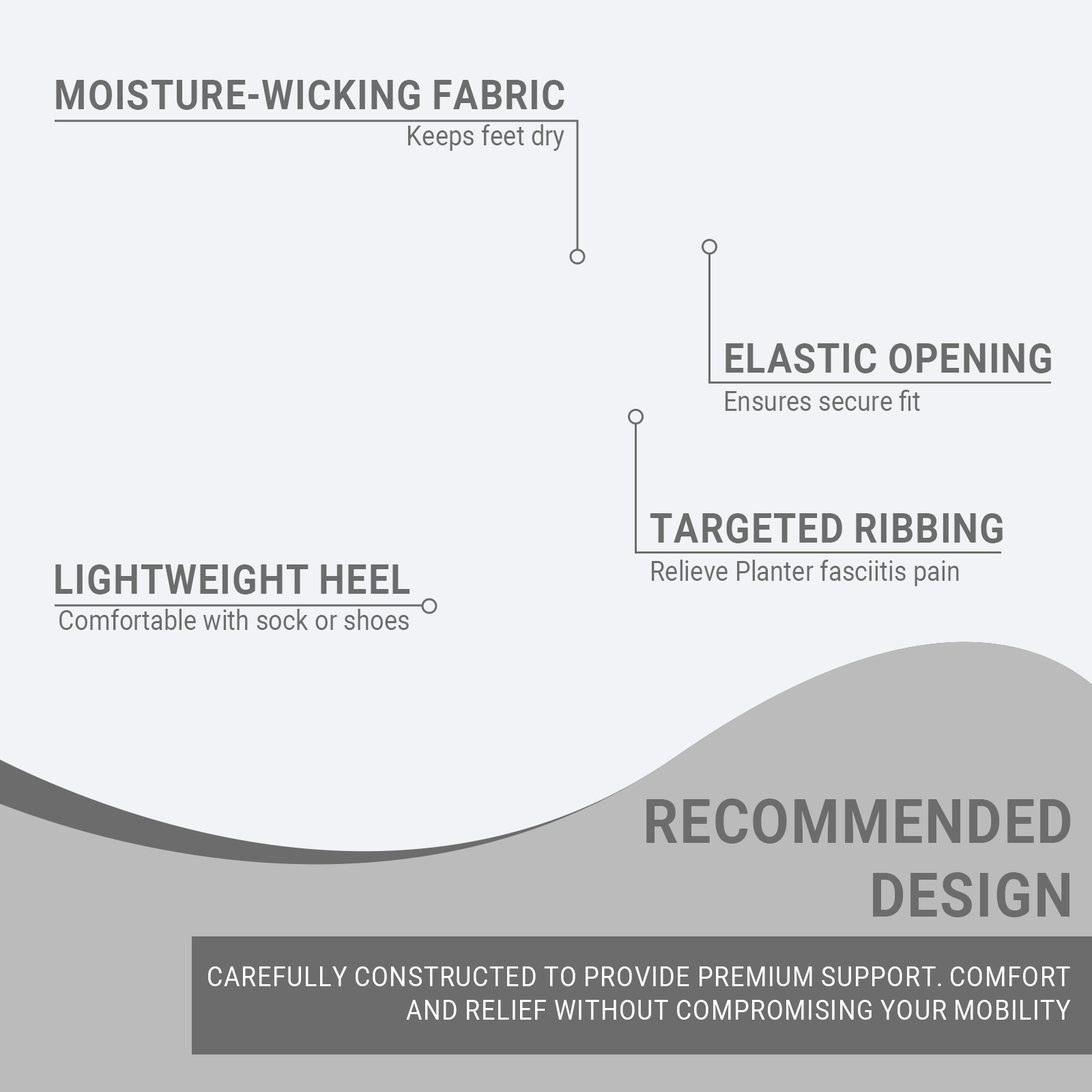
<style>
.page{position:relative;width:1092px;height:1092px;background:#f2f3f6}
.page>*{position:absolute;margin:0}
.t1{font:40.9px "Roboto-Bold";color:#6c6c6c;text-transform:uppercase;scale:0.9 1}
.t2{font:27.7px "Roboto-Regular";color:#6c6c6c;scale:0.9 1}
.t3{font:61.4px "Roboto-Bold";color:#6c6c6c;text-transform:uppercase;scale:0.9 1}
.t4{font:27.7px "Roboto-Regular";color:#ffffff;text-transform:uppercase;scale:0.9 1}
</style>
<div class="page">
<p class="t1" style="left:56px;top:80px;width:508px;height:30px">Moisture-wicking fabric</p>
<p class="t2" style="left:408px;top:124px;width:156px;height:27px">Keeps feet dry</p>
<p class="t1" style="left:725px;top:343px;width:326px;height:30px">Elastic opening</p>
<p class="t2" style="left:725px;top:390px;width:195px;height:21px">Ensures secure fit</p>
<p class="t1" style="left:650px;top:513px;width:353px;height:30px">Targeted ribbing</p>
<p class="t1" style="left:55px;top:564px;width:355px;height:30px">Lightweight heel</p>
<p class="t2" style="left:652px;top:560px;width:307px;height:26px">Relieve Planter fasciitis pain</p>
<p class="t2" style="left:59px;top:609px;width:350px;height:21px">Comfortable with sock or shoes</p>
<p class="t3" style="left:646px;top:799px;width:425px;height:118px;text-align:right">Recommended<br>Design</p>
<p class="t4" style="left:208px;top:966px;width:863px;height:54px;text-align:right">Carefully constructed to provide premium support. Comfort<br>And relief without compromising your mobility</p>
</div>
